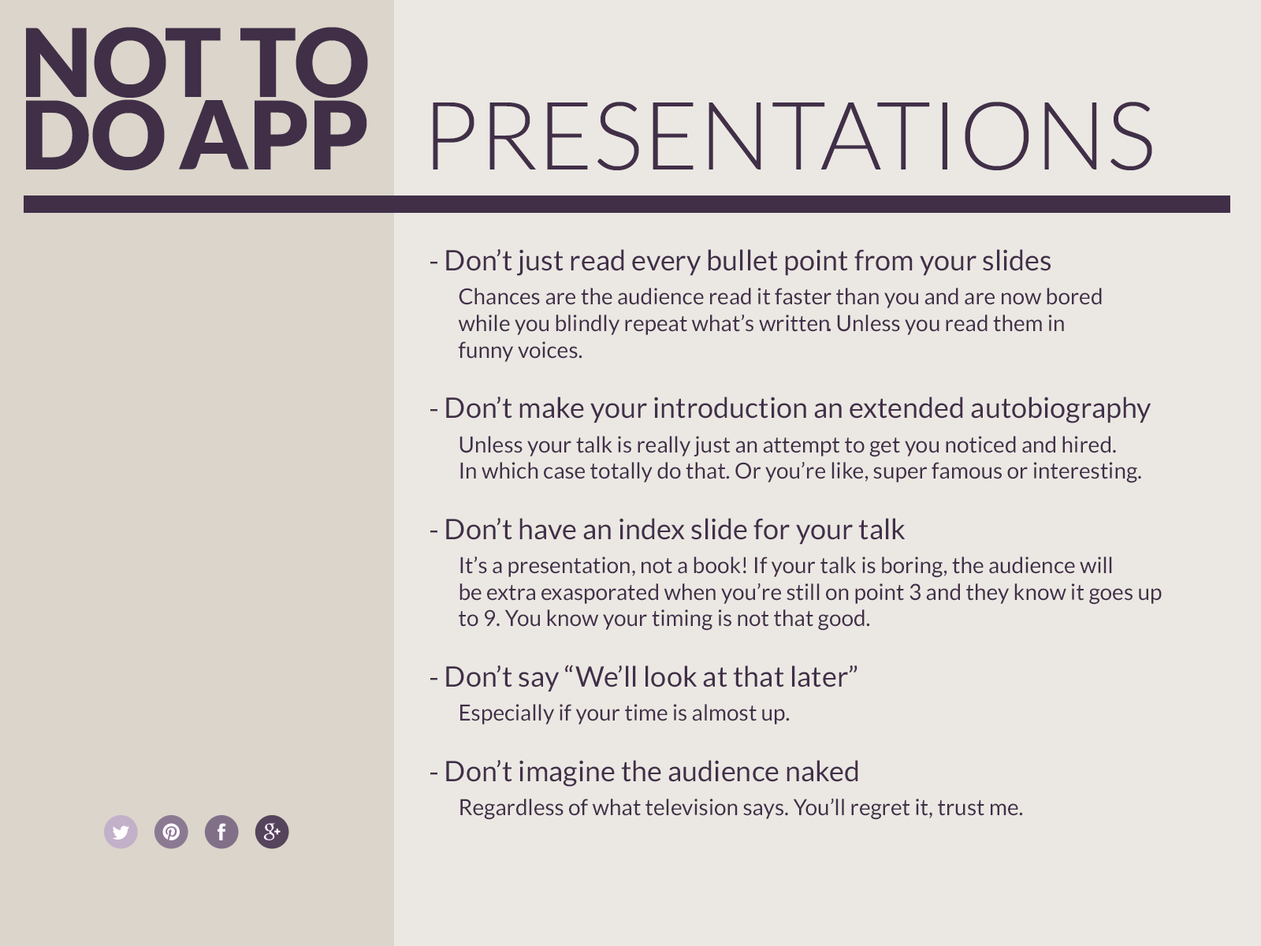
<style>
.page{position:relative;width:1261px;height:946px;background:#ebe8e3}
.page>*{position:absolute;margin:0}
.t1{font:94.6px/72.5px "Lato-Black";color:#412f48;text-transform:uppercase}
.t2{font:94.6px "Lato-Light";color:#412f48;text-transform:uppercase}
.t3{font:22.1px "Lato-Regular";color:#412f48}
.t4{font:28.4px "MyriadPro-Regular";color:#412f48}
.t5{font:28.4px "Lato-Regular";color:#412f48}
</style>
<div class="page">
<p class="t1" style="left:26px;top:27px;width:342px;height:143px">not to<br>do app</p>
<p class="t2" style="left:433px;top:102px;width:719px;height:68px">presentations</p>
<p class="t3" style="left:430px;top:249px;width:732px;height:571px"><span class="t4">-</span><span class="t5"> Don’t just read every bullet point from your slides<br> </span>Chances are the audience read it faster than you and are now bored<br> while you blindly repeat what’s written. Unless you read them in<br> funny voices.<br><br><span class="t4">-</span><span class="t5"> Don’t make your introduction an extended autobiography<br> </span>Unless your talk is really just an attempt to get you noticed and hired.<br> In which case totally do that. Or you’re like, super famous or interesting.<br><br><span class="t4">-</span><span class="t5"> Don’t have an index slide for your talk<br> </span>It’s a presentation, not a book! If your talk is boring, the audience will<br> be extra exasporated when you’re still on point 3 and they know it goes up<br> to 9. You know your timing is not that good.<br><br><span class="t4">-</span><span class="t5"> Don’t say “We’ll look at that later”<br> </span>Especially if your time is almost up.<br><br><span class="t4">-</span><span class="t5"> Don’t imagine the audience naked<br> </span>Regardless of what television says. You’ll regret it, trust me.</p>
</div>
